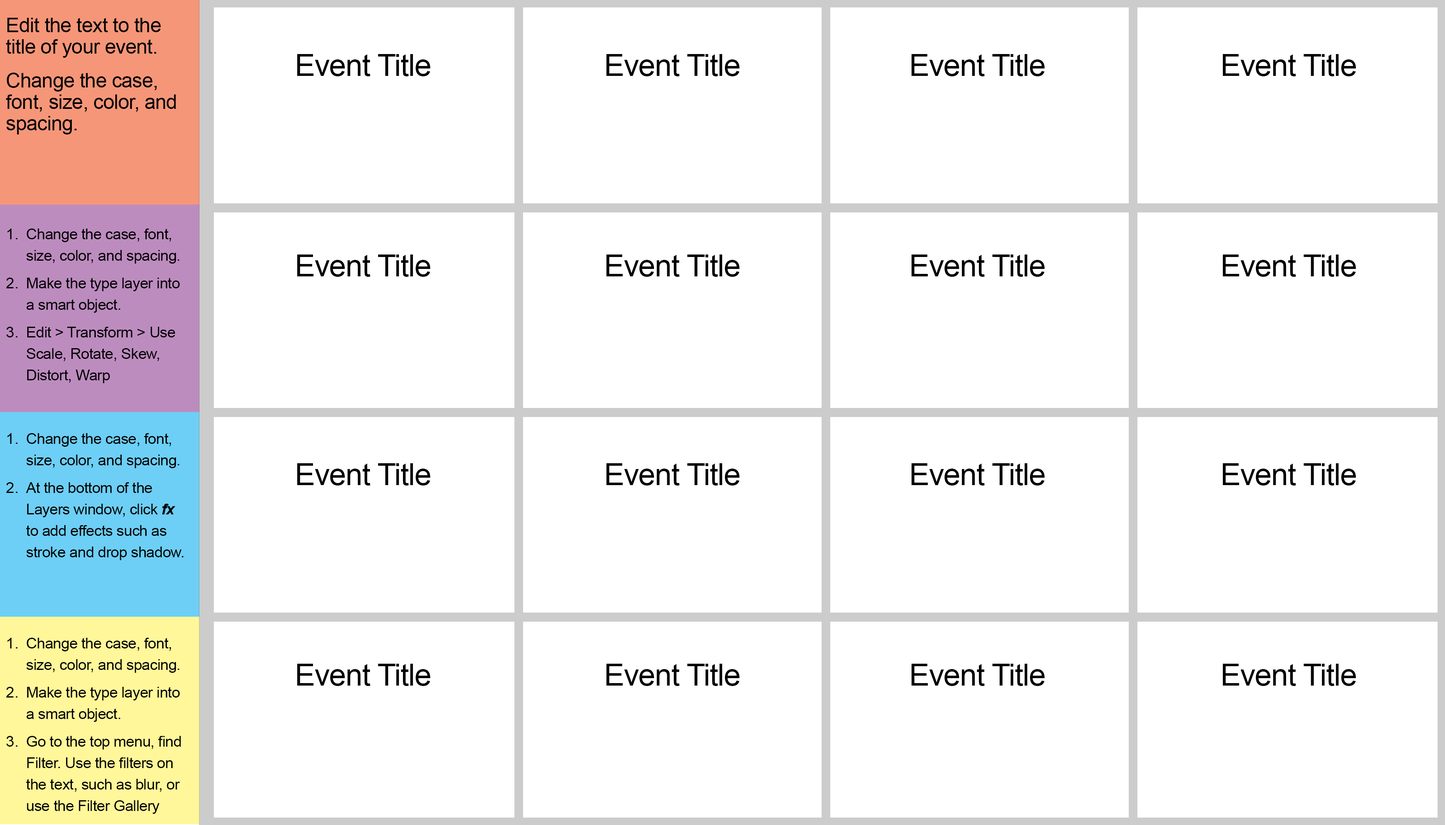
<style>
.page{position:relative;width:1445px;height:825px;background:#ffffff}
.page>*{position:absolute;margin:0}
.t1{font:19.8px/21.5px "ArialMT";letter-spacing:-0.02em;color:#000000}
.t2{font:30.5px "ArialMT";letter-spacing:-0.02em;color:#000000}
.t3{font:14.9px/21.5px "ArialMT";letter-spacing:-0.02em;color:#000000}
.t4{font:14.9px/21.5px "Arial-BoldItalicMT";letter-spacing:-0.02em;color:#000000}
</style>
<div class="page">
<p class="t1" style="left:6px;top:18px;width:170px;height:117px">Edit the text to the title of your event.<br>Change the case, font, size, color, and spacing.</p>
<p class="t2" style="left:297px;top:54px;width:133px;height:22px">Event Title</p>
<p class="t2" style="left:606px;top:54px;width:134px;height:22px">Event Title</p>
<p class="t2" style="left:911px;top:54px;width:134px;height:22px">Event Title</p>
<p class="t2" style="left:1222px;top:54px;width:134px;height:22px">Event Title</p>
<p class="t3" style="left:6px;top:229px;width:174px;height:154px">Change the case, font, size, color, and spacing.<br>Make the type layer into a smart object.<br>Edit &gt; Transform &gt; Use Scale, Rotate, Skew, Distort, Warp</p>
<p class="t2" style="left:297px;top:255px;width:133px;height:22px">Event Title</p>
<p class="t2" style="left:606px;top:255px;width:134px;height:22px">Event Title</p>
<p class="t2" style="left:911px;top:255px;width:134px;height:22px">Event Title</p>
<p class="t2" style="left:1222px;top:255px;width:134px;height:22px">Event Title</p>
<p class="t3" style="left:6px;top:433px;width:178px;height:127px">Change the case, font, size, color, and spacing.<br>At the bottom of the Layers window, click <span class="t4">fx </span>to add effects such as stroke and drop shadow.</p>
<p class="t2" style="left:297px;top:463px;width:133px;height:23px">Event Title</p>
<p class="t2" style="left:606px;top:463px;width:134px;height:23px">Event Title</p>
<p class="t2" style="left:911px;top:463px;width:134px;height:23px">Event Title</p>
<p class="t2" style="left:1222px;top:463px;width:134px;height:23px">Event Title</p>
<p class="t3" style="left:6px;top:638px;width:175px;height:176px">Change the case, font, size, color, and spacing.<br>Make the type layer into a smart object.<br>Go to the top menu, find Filter. Use the filters on the text, such as blur, or use the Filter Gallery</p>
<p class="t2" style="left:297px;top:664px;width:133px;height:22px">Event Title</p>
<p class="t2" style="left:606px;top:664px;width:134px;height:22px">Event Title</p>
<p class="t2" style="left:911px;top:664px;width:134px;height:22px">Event Title</p>
<p class="t2" style="left:1222px;top:664px;width:134px;height:22px">Event Title</p>
</div>
